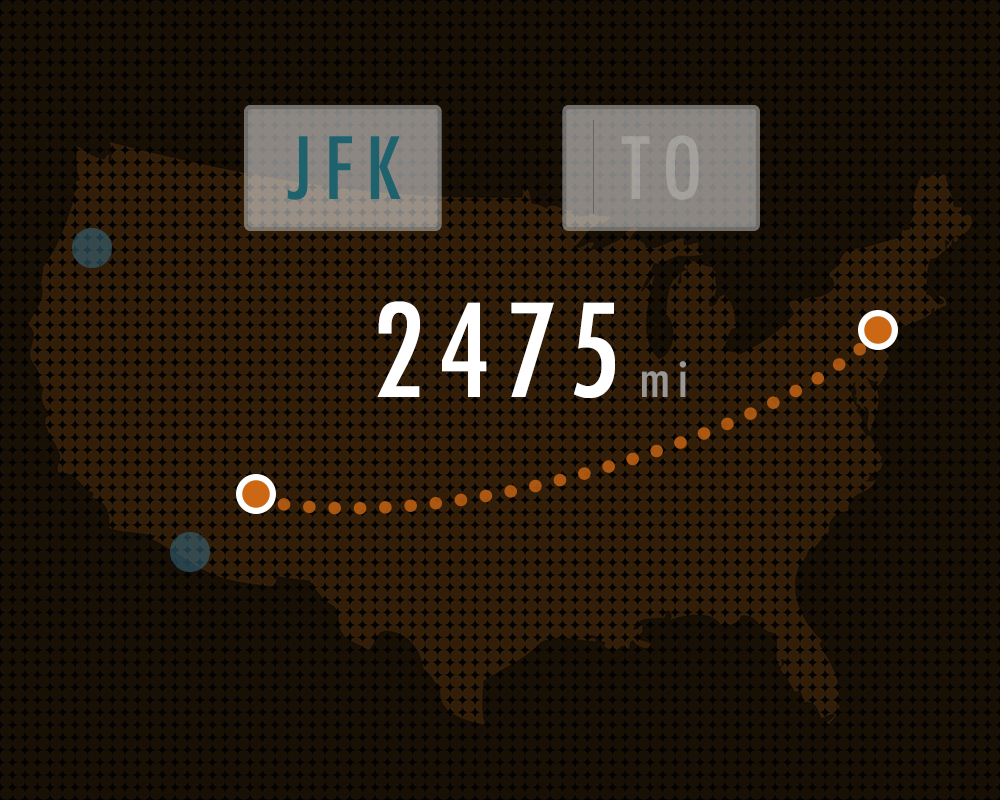
<style>
.page{position:relative;width:1000px;height:800px;background:#180f05}
.page>*{position:absolute;margin:0}
.t1{font:83.3px "Futura-CondensedMedium";letter-spacing:0.15em;color:#1d626c}
.t2{font:83.3px "Futura-CondensedMedium";letter-spacing:0.15em;color:#a4a09c}
.t3{font:125px "Futura-CondensedMedium";letter-spacing:0.15em;color:#ffffff}
.t4{font:50px "Futura-CondensedMedium";letter-spacing:0.15em;color:#999897}
</style>
<div class="page">
<p class="t1" style="left:287px;top:136px;width:114px;height:64px">JFK</p>
<p class="t2" style="left:621px;top:135px;width:78px;height:65px">TO</p>
<p class="t3" style="left:377px;top:301px;width:309px;height:97px">2475<span class="t4">mi</span></p>
</div>
